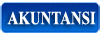
<style>
.page{position:relative;width:100px;height:35px}
.page>*{position:absolute;margin:0}
.t1{font:18.5px "TimesNewRomanPS-BoldMT";color:#fefdfd;scale:0.8 1}
</style>
<div class="page">
<p class="t1" style="left:7px;top:11px;width:89px;height:14px">AKUNTANSI</p>
</div>
